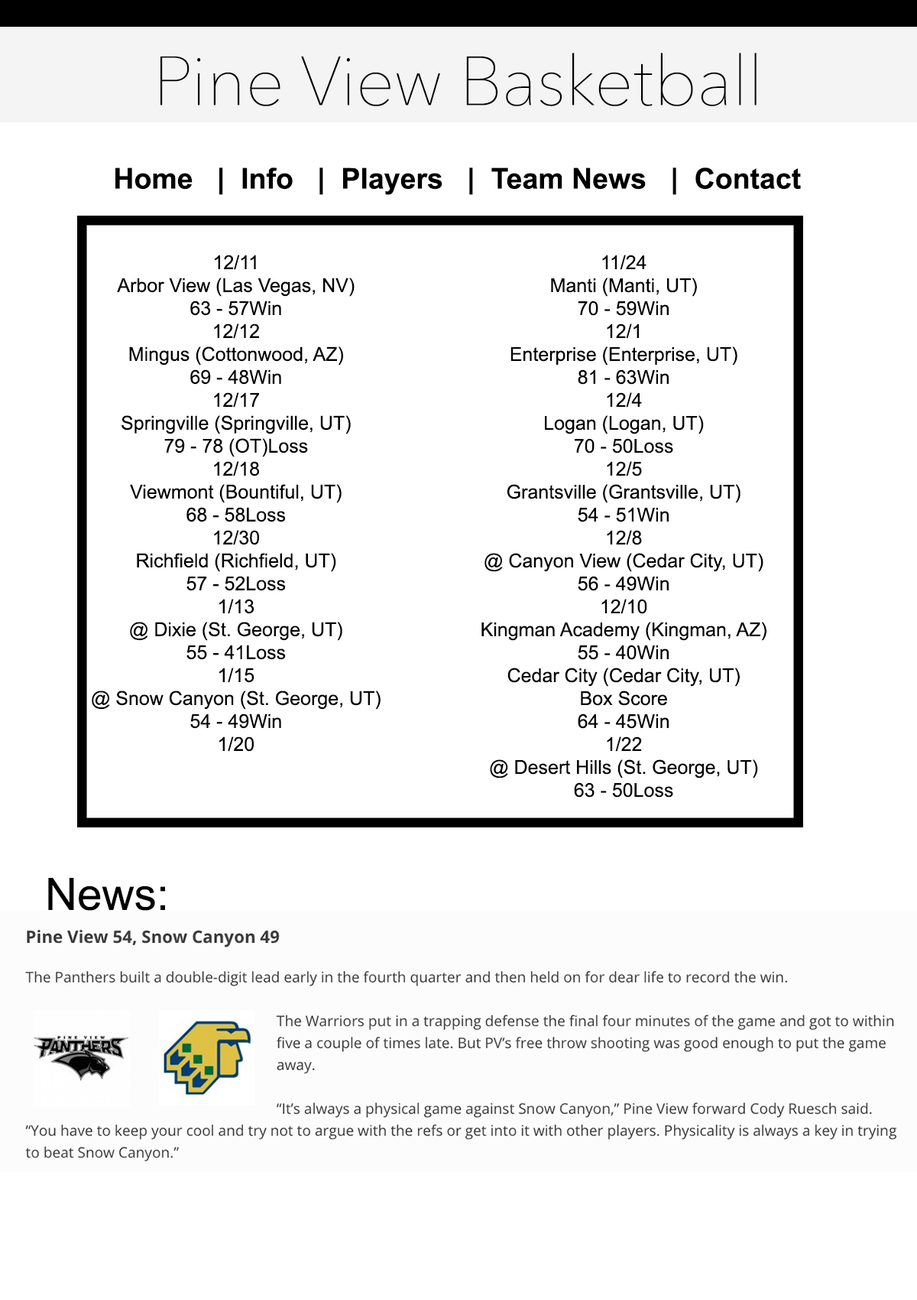
<style>
.page{position:relative;width:917px;height:1300px;background:#ffffff}
.page>*{position:absolute;margin:0}
.t1{font:68.8px "AvenirNext-UltraLight";color:#000000}
.t2{font:28.7px "Arial-BoldMT";color:#000000}
.t3{font:19.1px "ArialMT";color:#000000}
.t4{font:44.6px "ArialMT";color:#000000}
</style>
<div class="page">
<p class="t1" style="left:161px;top:53px;width:596px;height:53px">Pine View Basketball</p>
<p class="t2" style="left:115px;top:167px;width:686px;height:28px">Home   |  Info   |  Players   |  Team News   |  Contact</p>
<p class="t3" style="left:92px;top:255px;width:289px;height:497px;text-align:center">12/11<br>Arbor View (Las Vegas, NV)<br>63 - 57Win<br>12/12<br>Mingus (Cottonwood, AZ)<br>69 - 48Win<br>12/17<br>Springville (Springville, UT)<br>79 - 78 (OT)Loss<br>12/18<br>Viewmont (Bountiful, UT)<br>68 - 58Loss<br>12/30<br>Richfield (Richfield, UT)<br>57 - 52Loss<br>1/13<br>@ Dixie (St. George, UT)<br>55 - 41Loss<br>1/15<br>@ Snow Canyon (St. George, UT)<br>54 - 49Win<br>1/20</p>
<p class="t3" style="left:482px;top:255px;width:285px;height:542px;text-align:center">11/24<br>Manti (Manti, UT)<br>70 - 59Win<br>12/1<br>Enterprise (Enterprise, UT)<br>81 - 63Win<br>12/4<br>Logan (Logan, UT)<br>70 - 50Loss<br>12/5<br>Grantsville (Grantsville, UT)<br>54 - 51Win<br>12/8<br>@ Canyon View (Cedar City, UT)<br>56 - 49Win<br>12/10<br>Kingman Academy (Kingman, AZ)<br>55 - 40Win<br>Cedar City (Cedar City, UT)<br>Box Score<br>64 - 45Win<br>1/22<br>@ Desert Hills (St. George, UT)<br>63 - 50Loss</p>
<p class="t4" style="left:48px;top:878px;width:117px;height:33px">News:</p>
</div>
